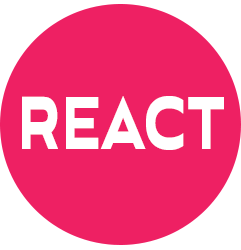
<style>
.page{position:relative;width:241px;height:250px;background:#ee2063}
.page>*{position:absolute;margin:0}
.t1{font:103.4px "AvianoSansBlack";color:#ffffff;scale:0.61 1}
</style>
<div class="page">
<p class="t1" style="left:22px;top:96px;width:202px;height:54px">react</p>
</div>
